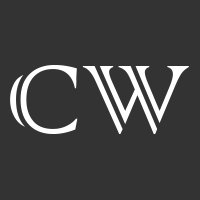
<style>
.page{position:relative;width:200px;height:200px;background:#333333}
.page>*{position:absolute;margin:0}
.t1{font:130px "ColonnaMT";color:#ffffff}
</style>
<div class="page">
<p class="t1" style="left:10px;top:65px;width:179px;height:69px">CW</p>
</div>
